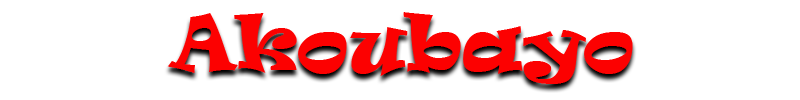
<style>
.page{position:relative;width:800px;height:100px;background:#ffffff}
.page>*{position:absolute;margin:0}
.t1{font:72px "Ravie";color:#fc0101}
</style>
<div class="page">
<p class="t1" style="left:167px;top:12px;width:466px;height:72px">Akoubayo</p>
</div>
